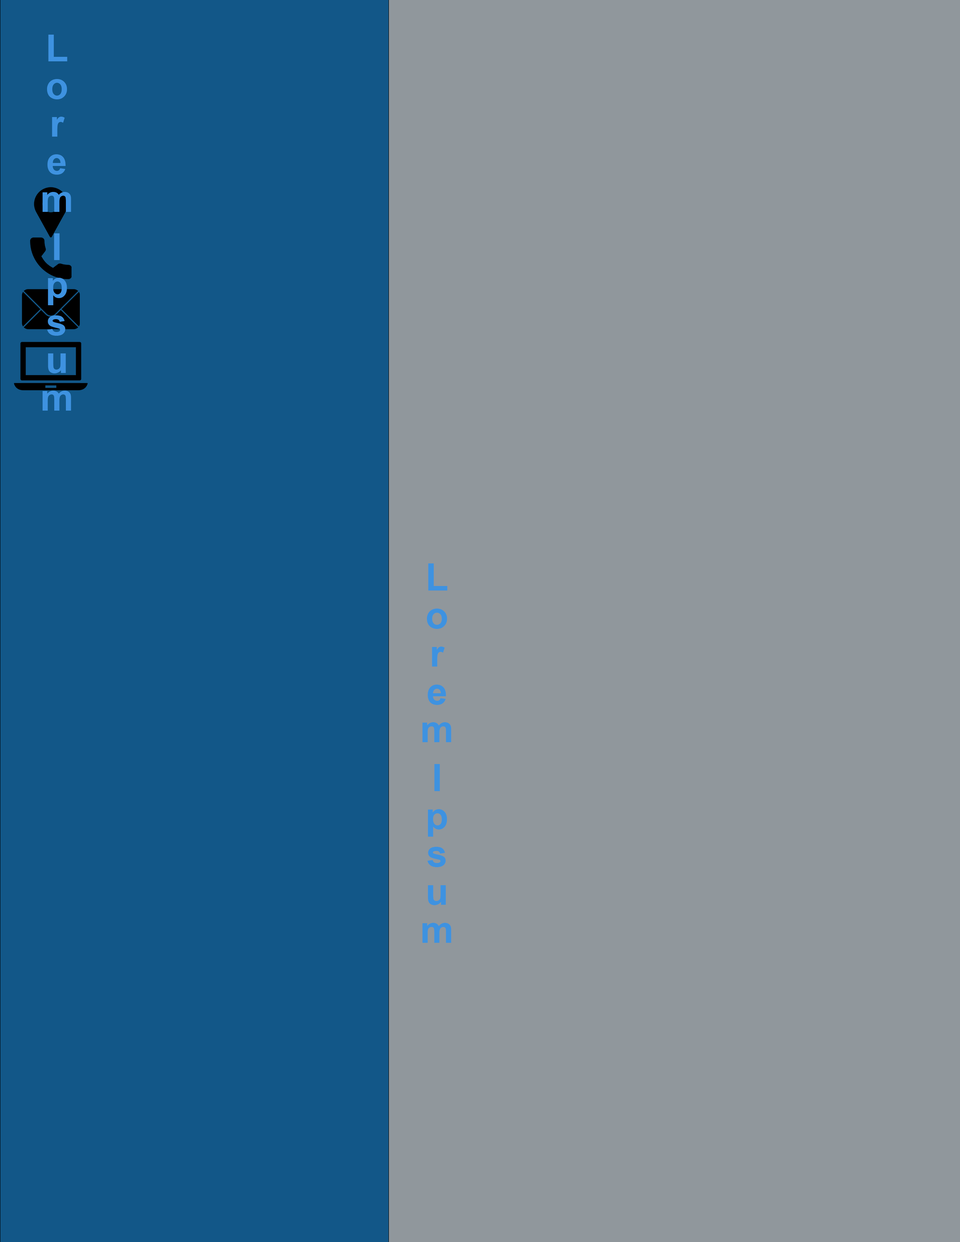
<style>
.page{position:relative;width:960px;height:1242px;background:#90979c}
.page>*{position:absolute;margin:0}
.t1{font:37.4px "Arial-BoldMT";letter-spacing:0.008em;color:#3e92e0}
.t2{font:37.6px "Arial-BoldMT";letter-spacing:0.008em;color:#3e92e0}
</style>
<div class="page">
<p class="t1" style="left:43px;top:35px;width:28px;height:376px">Lorem Ipsum</p>
<p class="t2" style="left:422px;top:564px;width:29px;height:379px">Lorem Ipsum</p>
</div>
